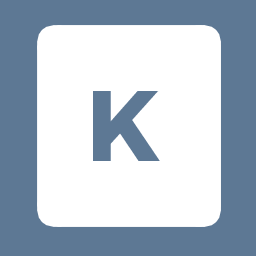
<style>
.page{position:relative;width:256px;height:256px;background:#ffffff}
.page>*{position:absolute;margin:0}
.t1{font:100px "Montserrat-Bold";color:#5d7894}
</style>
<div class="page">
<p class="t1" style="left:93px;top:91px;width:67px;height:70px">K</p>
</div>
